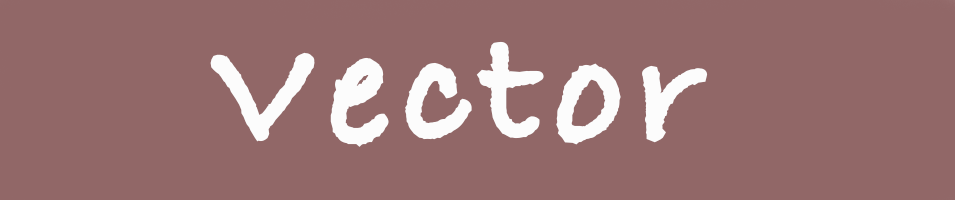
<style>
.page{position:relative;width:955px;height:200px;background:#916767}
.page>*{position:absolute;margin:0}
.t1{font:162.7px "BradleyHandITCTT-Bold";letter-spacing:0.05em;color:#fcfcfc;font-weight:bold}
</style>
<div class="page">
<p class="t1" style="left:210px;top:41px;width:498px;height:106px">Vector</p>
</div>
